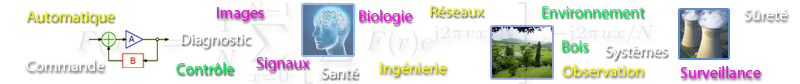
<style>
.page{position:relative;width:800px;height:84px;background:#ffffff}
.page>*{position:absolute;margin:0}
.t1{font:16px "MyriadPro-Regular";color:#f6f91b}
.t2{font:16px "MyriadPro-Regular";color:#09f65c}
.t3{font:16px "MyriadPro-Regular";color:#f609e2}
.t4{font:16px "MyriadPro-Regular";color:#ffffff}
</style>
<div class="page">
<p class="t1" style="left:430px;top:5px;width:54px;height:12px">Réseaux</p>
<p class="t2" style="left:542px;top:6px;width:103px;height:12px">Environnement</p>
<p class="t1" style="left:26px;top:10px;width:88px;height:15px">Automatique</p>
<p class="t3" style="left:217px;top:7px;width:47px;height:14px">Images</p>
<p class="t3" style="left:359px;top:9px;width:53px;height:16px">Biologie</p>
<p class="t4" style="left:744px;top:9px;width:43px;height:11px">Sûreté</p>
<p class="t2" style="left:562px;top:40px;width:26px;height:12px">Bois</p>
<p class="t2" style="left:176px;top:62px;width:58px;height:12px">Contrôle</p>
<p class="t3" style="left:256px;top:57px;width:54px;height:15px">Signaux</p>
<p class="t1" style="left:380px;top:62px;width:66px;height:14px">Ingénierie</p>
<p class="t1" style="left:562px;top:64px;width:81px;height:12px">Observation</p>
<p class="t3" style="left:680px;top:66px;width:81px;height:12px">Surveillance</p>
</div>
